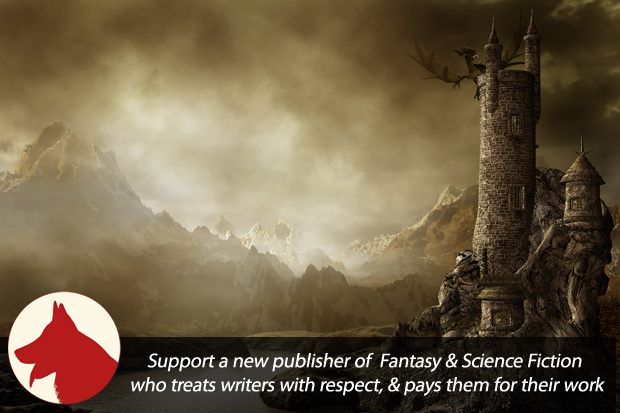
<style>
.page{position:relative;width:620px;height:413px}
.page>*{position:absolute;margin:0}
.t1{font:20px "MyriadPro-Regular";color:#ffffff;font-style:italic}
</style>
<div class="page">
<p class="t1" style="left:131px;top:352px;width:474px;height:44px;text-align:center">Support a new publisher of  Fantasy &amp; Science Fiction <br>who treats writers with respect, &amp; pays them for their work</p>
</div>
